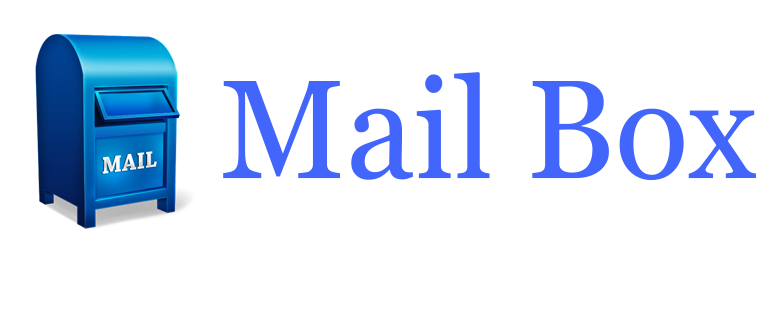
<style>
.page{position:relative;width:773px;height:309px;background:#ffffff}
.page>*{position:absolute;margin:0}
.t1{font:140px "Vani";color:#4265fc}
</style>
<div class="page">
<p class="t1" style="left:223px;top:72px;width:533px;height:109px">Mail Box</p>
</div>
